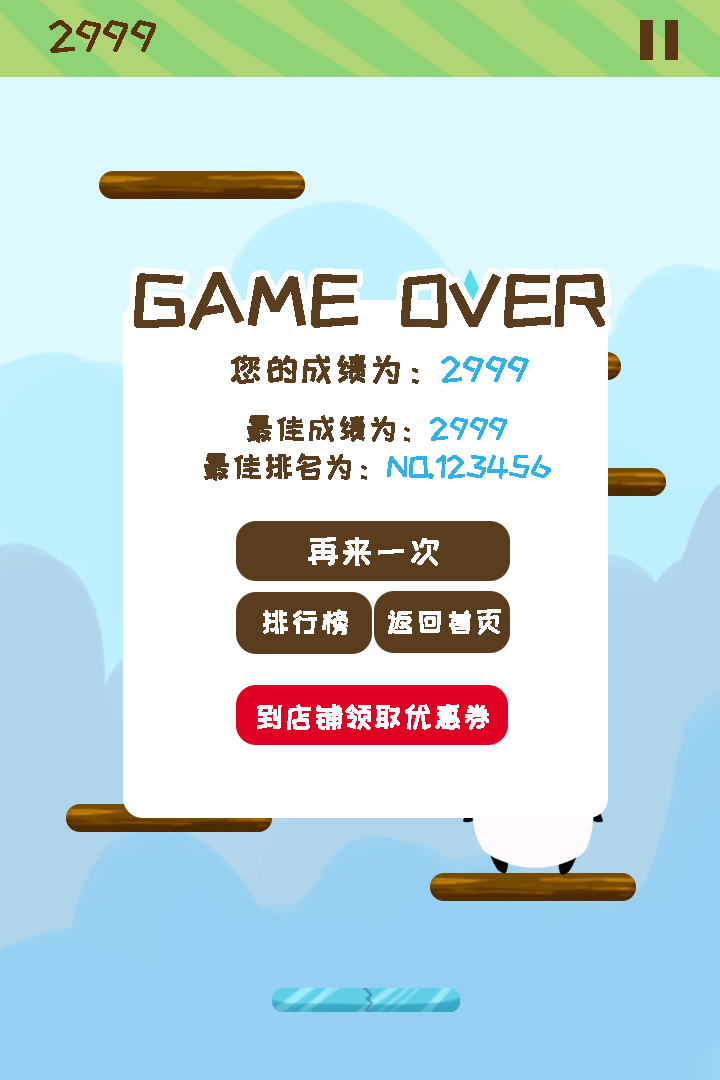
<style>
.page{position:relative;width:720px;height:1080px;background:#ffffff}
.page>*{position:absolute;margin:0}
.t1{font:41.5px "HappyZcool-2016";letter-spacing:-0.01em;color:#5a320b;font-weight:bold}
.t2{font:74.4px "HappyZcool-2016";letter-spacing:-0.01em;color:#593d1d;font-weight:bold}
.t3{font:34.2px "HappyZcool-2016";letter-spacing:-0.01em;color:#593d1d;font-weight:bold}
.t4{font:34.2px "HappyZcool-2016";letter-spacing:-0.01em;color:#30b2e9;font-weight:bold}
.t5{font:29.9px/37.5px "HappyZcool-2016";letter-spacing:-0.01em;color:#30b2e9;font-weight:bold}
.t6{font:29.9px/37.5px "HappyZcool-2016";letter-spacing:-0.01em;color:#593d1d;font-weight:bold}
.t7{font:33.1px "HappyZcool-2016";letter-spacing:-0.01em;color:#ffffff;font-weight:bold}
.t8{font:28.9px "HappyZcool-2016";letter-spacing:-0.01em;color:#ffffff;font-weight:bold}
</style>
<div class="page">
<p class="t1" style="left:49px;top:20px;width:107px;height:33px">2999</p>
<p class="t2" style="left:134px;top:272px;width:471px;height:58px">GAME OVER</p>
<p class="t3" style="left:231px;top:354px;width:298px;height:30px">您的成绩为：<span class="t4">2999</span></p>
<p class="t5" style="left:204px;top:415px;width:347px;height:66px;text-align:center"><span class="t6">最佳成绩为：</span>2999<br><span class="t6">最佳排名为：</span>NO.123456</p>
<p class="t7" style="left:308px;top:537px;width:131px;height:29px">再来一次</p>
<p class="t8" style="left:263px;top:609px;width:85px;height:26px">排行榜</p>
<p class="t8" style="left:388px;top:609px;width:113px;height:26px">返回首页</p>
<p class="t8" style="left:257px;top:704px;width:232px;height:26px">到店铺领取优惠券</p>
</div>
